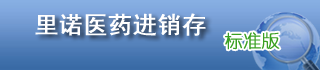
<style>
.page{position:relative;width:320px;height:70px}
.page>*{position:absolute;margin:0}
.t1{font:24px "SimHei";color:#ffffff;font-weight:bold}
.t2{font:18px "YouYuan";color:#3aa023;font-weight:bold}
</style>
<div class="page">
<p class="t1" style="left:35px;top:13px;width:171px;height:23px">里诺医药进销存</p>
<p class="t2" style="left:225px;top:32px;width:55px;height:18px">标准版</p>
</div>
